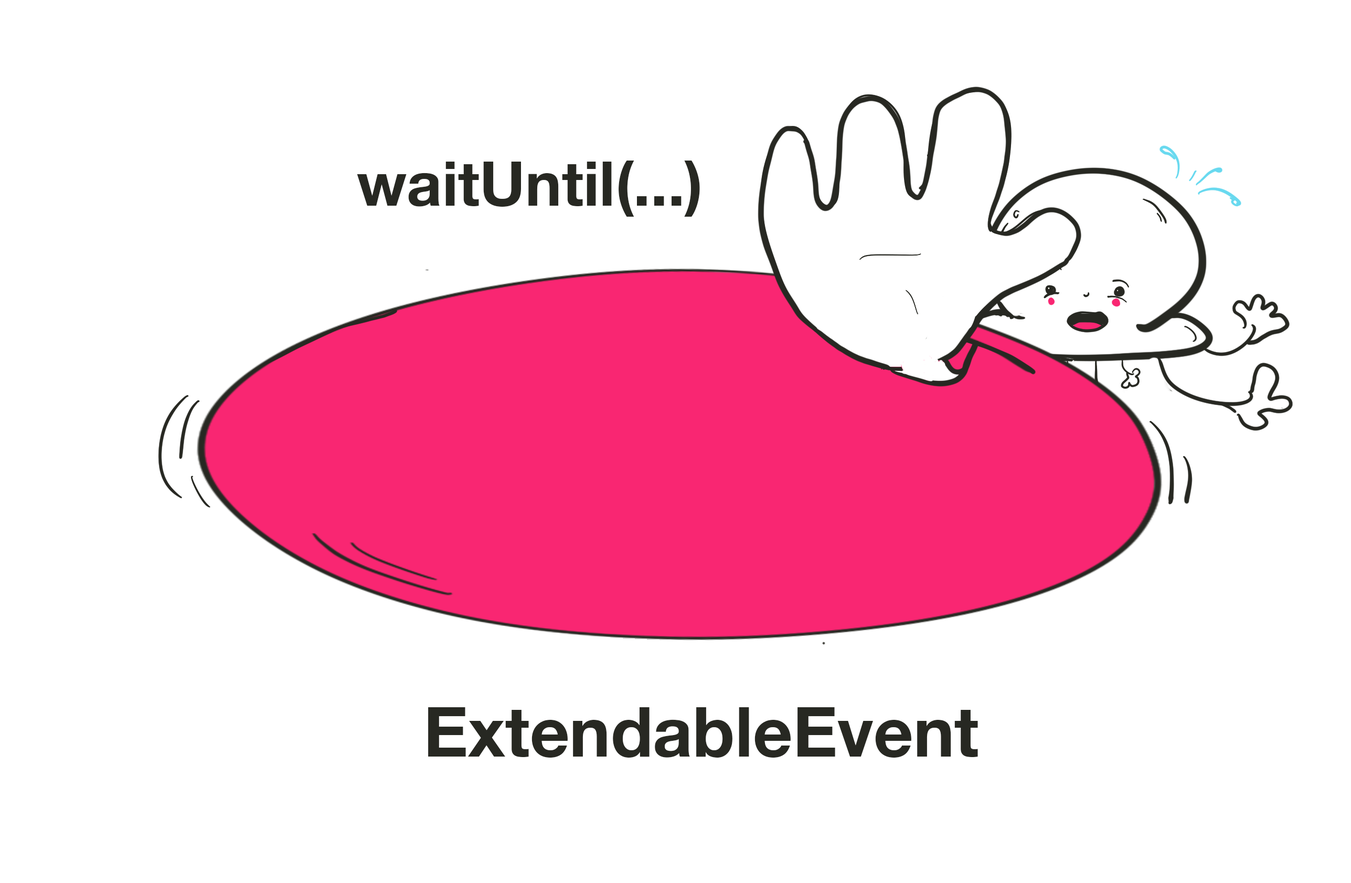
<style>
.page{position:relative;width:1351px;height:883px;background:#ffffff}
.page>*{position:absolute;margin:0}
.t1{font:61.5px "HelveticaNeue-Bold";color:#272822}
.t2{font:69.2px "HelveticaNeue-Bold";color:#272822}
</style>
<div class="page">
<p class="t1" style="left:357px;top:161px;width:343px;height:56px">waitUntil(...)</p>
<p class="t2" style="left:428px;top:707px;width:550px;height:50px">ExtendableEvent</p>
</div>
